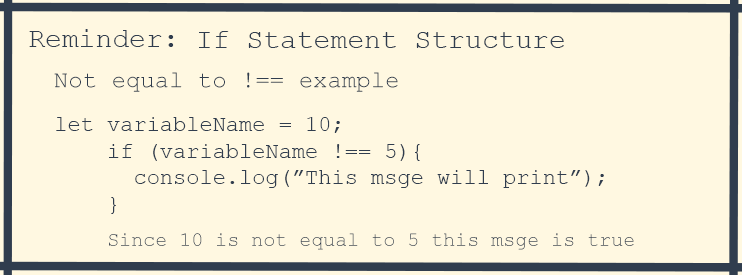
<style>
.page{position:relative;width:742px;height:275px;background:#fff8e1}
.page>*{position:absolute;margin:0}
.t1{font:28px "CourierNewPSMT";color:#303d4e}
.t2{font:24px "CourierNewPSMT";color:#303d4e}
.t3{font:22px "CourierNewPSMT";color:#303d4e}
.t4{font:24px "CourierNewPS-BoldItalicMT";color:#303d4e}
.t5{font:20px "CourierNewPSMT";color:#303d4e}
</style>
<div class="page">
<p class="t1" style="left:29px;top:29px;width:145px;height:18px">Reminder:</p>
<p class="t1" style="left:199px;top:31px;width:365px;height:17px">If Statement Structure</p>
<p class="t2" style="left:54px;top:72px;width:344px;height:20px">Not equal to !== example</p>
<p class="t3" style="left:56px;top:117px;width:548px;height:97px"><span class="t4">  <br><br> </span>let variableName = 10;<br>     if (variableName !== 5){<br>       console.log(”This msge will print”);<br>     }</p>
<p class="t5" style="left:109px;top:233px;width:525px;height:17px">Since 10 is not equal to 5 this msge is true</p>
</div>
